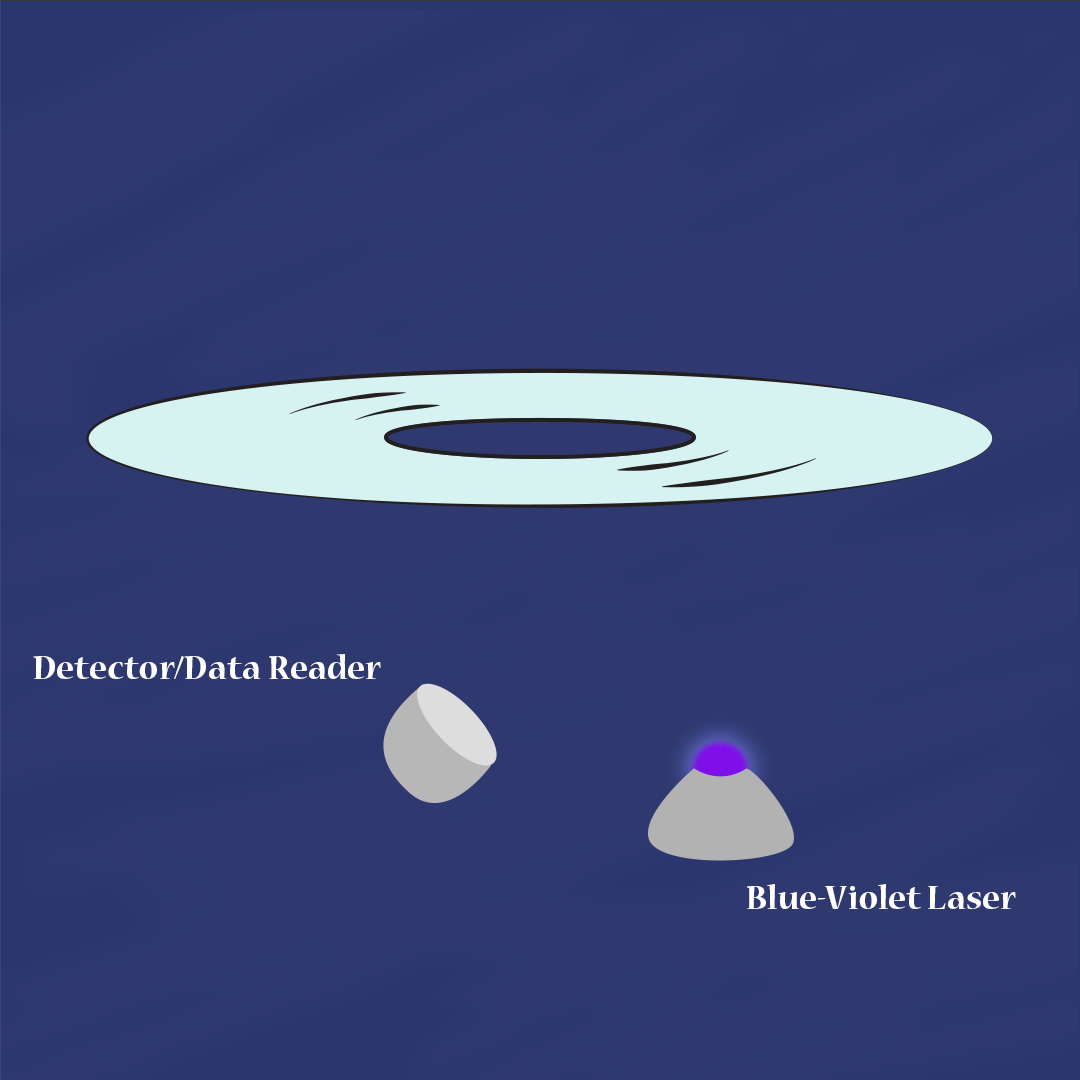
<style>
.page{position:relative;width:1080px;height:1080px;background:#2f396f}
.page>*{position:absolute;margin:0}
.t1{font:36px "NuevaStd-Bold";color:#ffffff}
</style>
<div class="page">
<p class="t1" style="left:33px;top:654px;width:348px;height:25px">Detector/Data Reader</p>
<p class="t1" style="left:747px;top:884px;width:269px;height:25px">Blue-Violet Laser</p>
</div>
